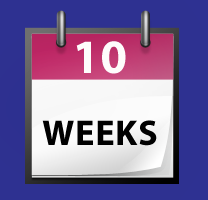
<style>
.page{position:relative;width:208px;height:200px;background:#2e3191}
.page>*{position:absolute;margin:0}
.t1{font:36px/18px "MyriadPro-Bold";letter-spacing:0.025em;color:#000000;text-transform:uppercase}
.t2{font:48px/18px "MyriadPro-Bold";letter-spacing:0.025em;color:#fefcfc;text-transform:uppercase}
</style>
<div class="page">
<p class="t1" style="left:42px;top:41px;width:115px;height:105px;text-align:center"><span class="t2">10<br><br><br><br></span>weeks</p>
</div>
